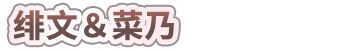
<style>
.page{position:relative;width:360px;height:50px;background:#ffffff}
.page>*{position:absolute;margin:0}
.t1{font:32px "SourceHanSansSC-Bold";font-weight:bold}
</style>
<div class="page">
<p class="t1" style="left:13px;top:9px;width:161px;height:32px">绯文＆菜乃</p>
</div>
